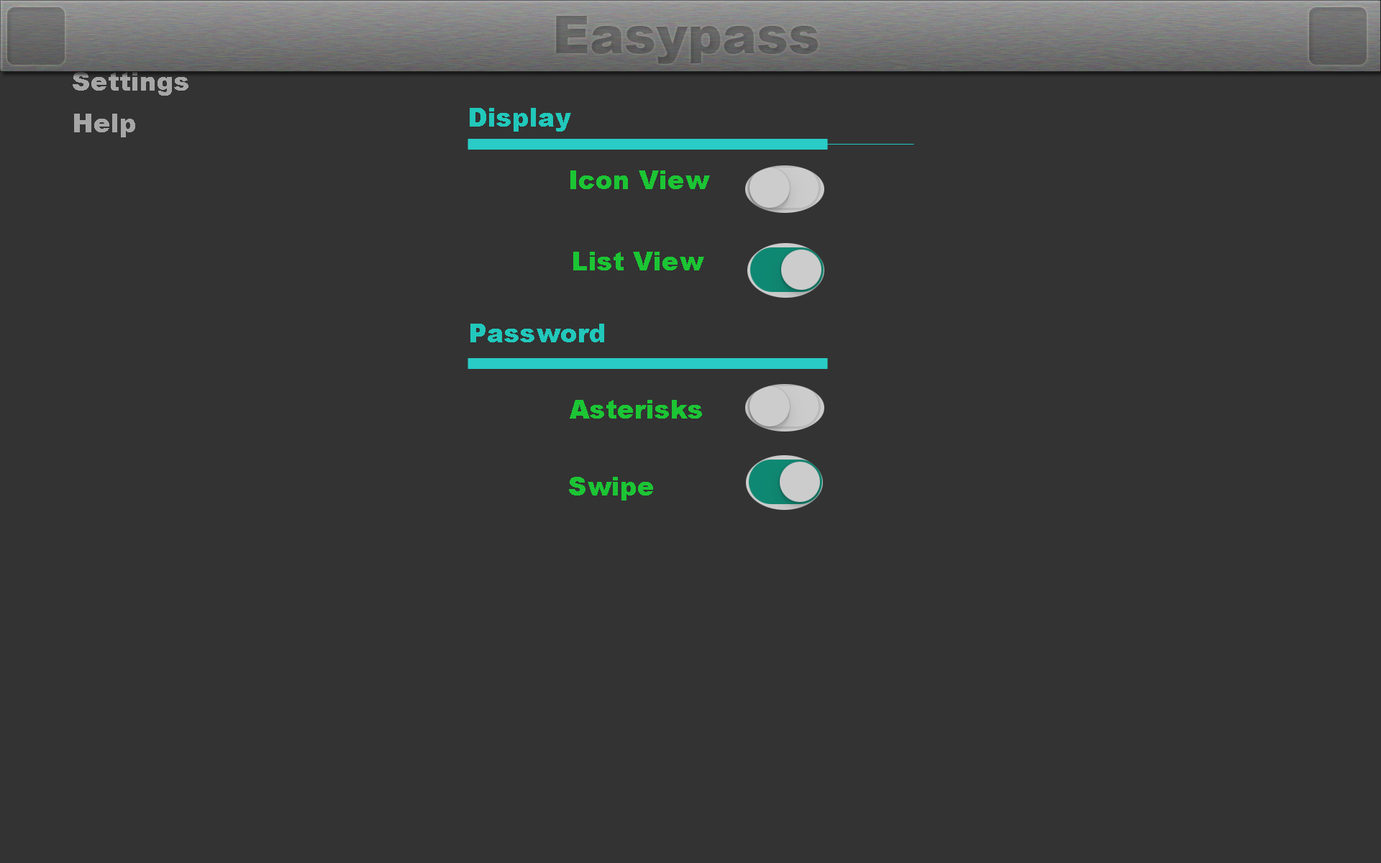
<style>
.page{position:relative;width:1381px;height:863px;background:#333333}
.page>*{position:absolute;margin:0}
.t1{font:25.9px "Arial-Black";color:#a6a6a6}
.t2{font:25.9px "Arial-Black";color:#21c8bb}
.t3{font:25.9px "Arial-Black";color:#1cc534}
</style>
<div class="page">
<p class="t1" style="left:73px;top:72px;width:115px;height:24px">Settings</p>
<p class="t1" style="left:74px;top:114px;width:61px;height:23px">Help</p>
<p class="t2" style="left:470px;top:108px;width:101px;height:24px">Display</p>
<p class="t3" style="left:570px;top:170px;width:140px;height:19px">Icon View</p>
<p class="t3" style="left:573px;top:252px;width:131px;height:18px">List View</p>
<p class="t2" style="left:470px;top:324px;width:134px;height:18px">Password</p>
<p class="t3" style="left:570px;top:400px;width:132px;height:19px">Asterisks</p>
<p class="t3" style="left:569px;top:477px;width:84px;height:24px">Swipe</p>
</div>
